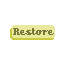
<style>
.page{position:relative;width:64px;height:64px;background:#ffffff}
.page>*{position:absolute;margin:0}
.t1{font:10px "Superscript";color:#777837}
</style>
<div class="page">
<p class="t1" style="left:13px;top:28px;width:41px;height:7px">Restore</p>
</div>
